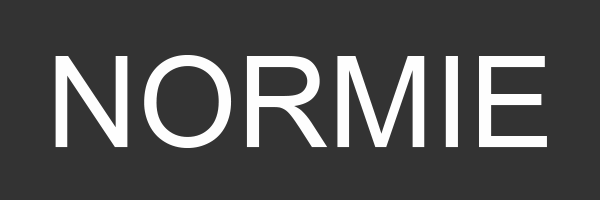
<style>
.page{position:relative;width:600px;height:200px;background:#333333}
.page>*{position:absolute;margin:0}
.t1{font:127px "ArialMT";color:#fefefe}
</style>
<div class="page">
<p class="t1" style="left:55px;top:55px;width:492px;height:93px">NORMIE</p>
</div>
